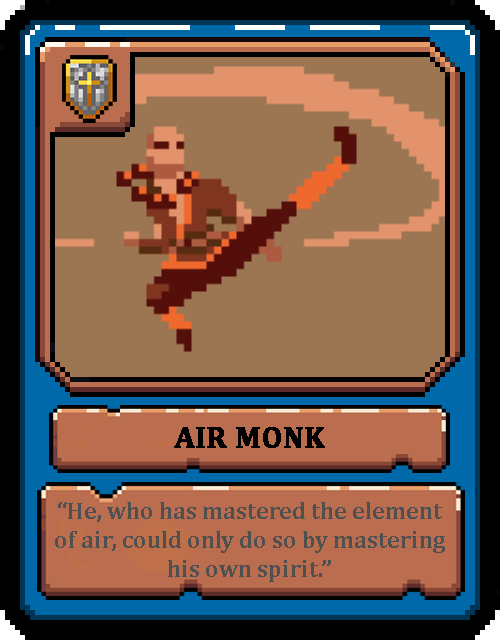
<style>
.page{position:relative;width:500px;height:640px;background:#9c7552}
.page>*{position:absolute;margin:0}
.t1{font:30px "Cambria-Bold";color:#000000;text-transform:uppercase;font-weight:bold}
.t2{font:24px "Cambria-Bold";color:#505050}
</style>
<div class="page">
<p class="t1" style="left:174px;top:427px;width:151px;height:21px">Air Monk</p>
<p class="t2" style="left:55px;top:502px;width:390px;height:80px;text-align:center">“He, who has mastered the element of air, could only do so by mastering his own spirit.”</p>
</div>
